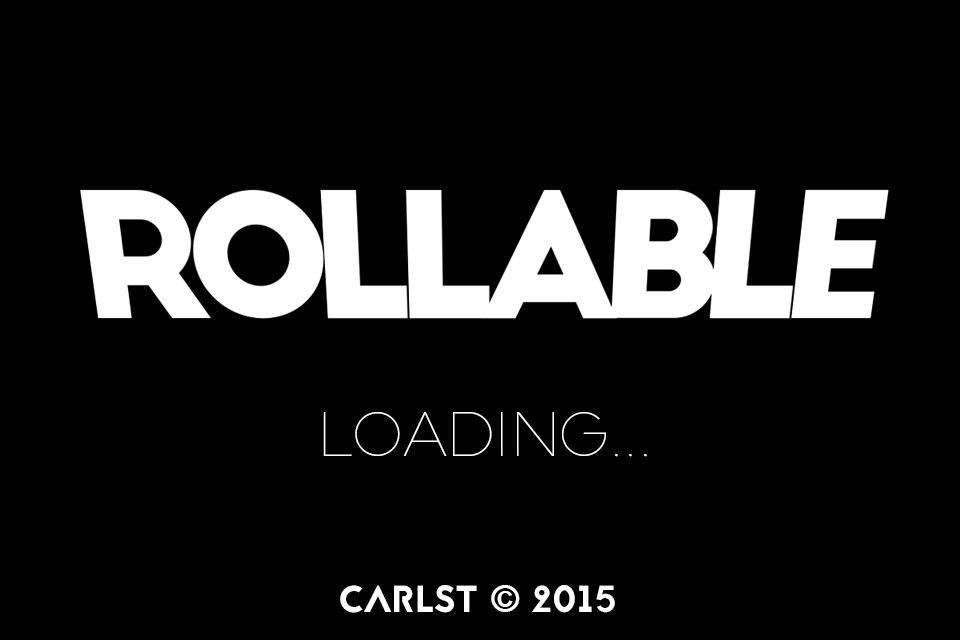
<style>
.page{position:relative;width:960px;height:640px;background:#000000}
.page>*{position:absolute;margin:0}
.t1{font:58.3px "SlimJoe";color:#ffffff}
.t2{font:37.5px "Jaapokkisubtract-Regular";color:#ffffff}
.t3{font:37.5px "KannadaMN-Bold";color:#ffffff}
.t4{font:37.5px "Jaapokkienchance-Regular";color:#ffffff}
</style>
<div class="page">
<p class="t1" style="left:323px;top:412px;width:324px;height:45px">loading...</p>
<p class="t2" style="left:340px;top:585px;width:275px;height:28px">CARLST <span class="t3">© </span><span class="t4">2015</span></p>
</div>
